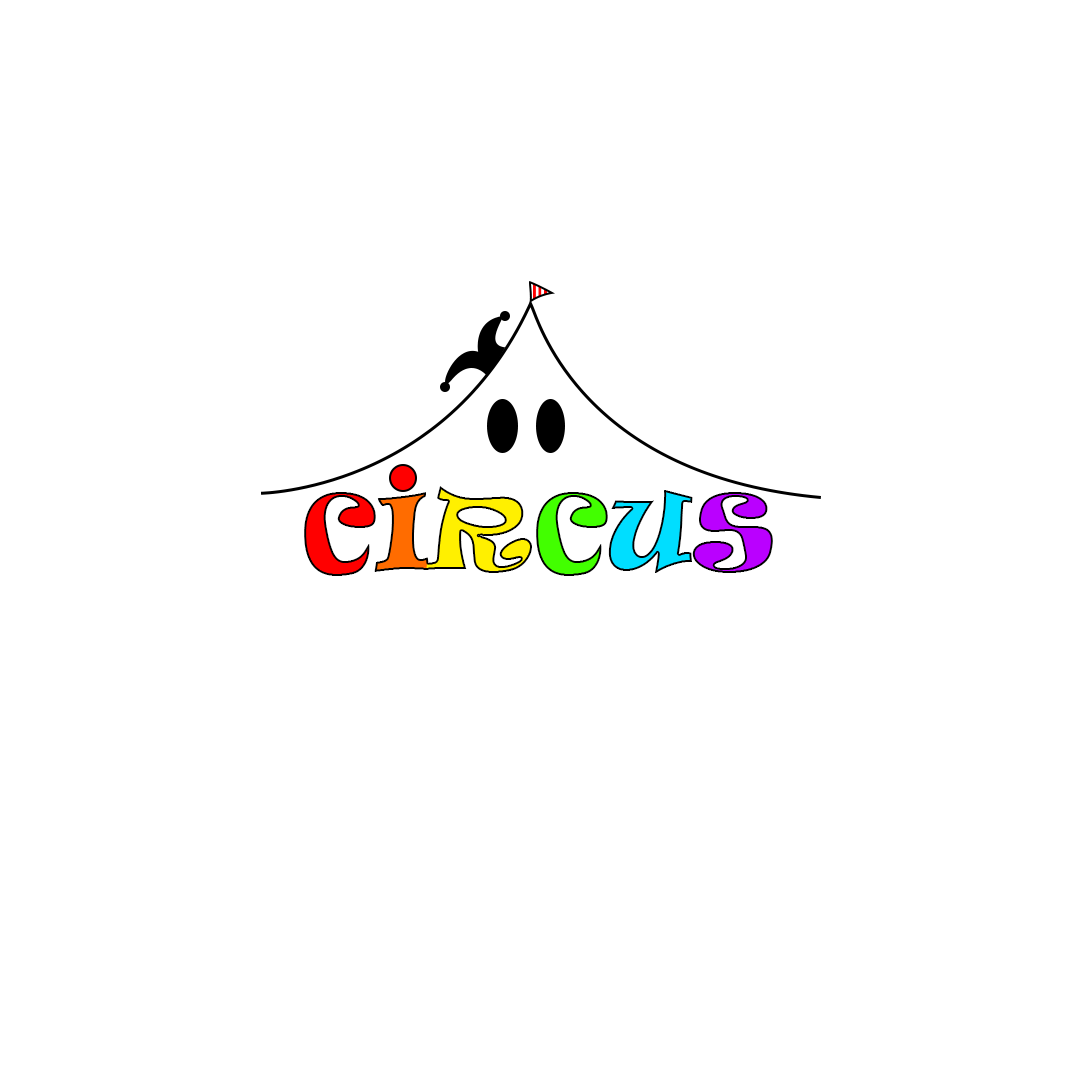
<style>
.page{position:relative;width:1080px;height:1080px;background:#ffffff}
.page>*{position:absolute;margin:0}
.t1{font:100px "Ravie";color:#ff0000}
.t2{font:100px "Ravie";color:#ff6c00}
.t3{font:100px "Ravie";color:#fff000}
.t4{font:100px "Ravie";color:#42ff00}
.t5{font:100px "Ravie";color:#00deff}
.t6{font:100px "Ravie";color:#ba00ff}
</style>
<div class="page">
<p class="t1" style="left:304px;top:486px;width:469px;height:90px">C<span class="t2">I</span><span class="t3">R</span><span class="t4">C</span><span class="t5">U</span><span class="t6">S</span></p>
</div>
